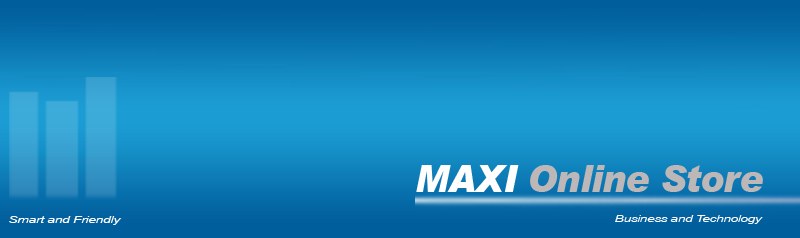
<style>
.page{position:relative;width:800px;height:238px}
.page>*{position:absolute;margin:0}
.t1{font:38px "Arial-BlackItalic";letter-spacing:-0.025em;color:#beb7b7;scale:0.95 1}
.t2{font:38px "Arial-BlackItalic";letter-spacing:-0.025em;color:#ffffff;scale:0.95 1}
.t3{font:9.8px "Arial-ItalicMT";letter-spacing:-0.025em;color:#ffffff;scale:1.42 1}
.t4{font:10.1px "Arial-ItalicMT";letter-spacing:-0.05em;color:#ffffff;scale:1.43 1}
</style>
<div class="page">
<p class="t1" style="left:416px;top:165px;width:347px;height:27px"><span class="t2">MAXI </span>Online Store</p>
<p class="t3" style="left:9px;top:216px;width:113px;height:9px">Smart and Friendly</p>
<p class="t4" style="left:615px;top:215px;width:148px;height:9px">Business and Technology</p>
</div>
